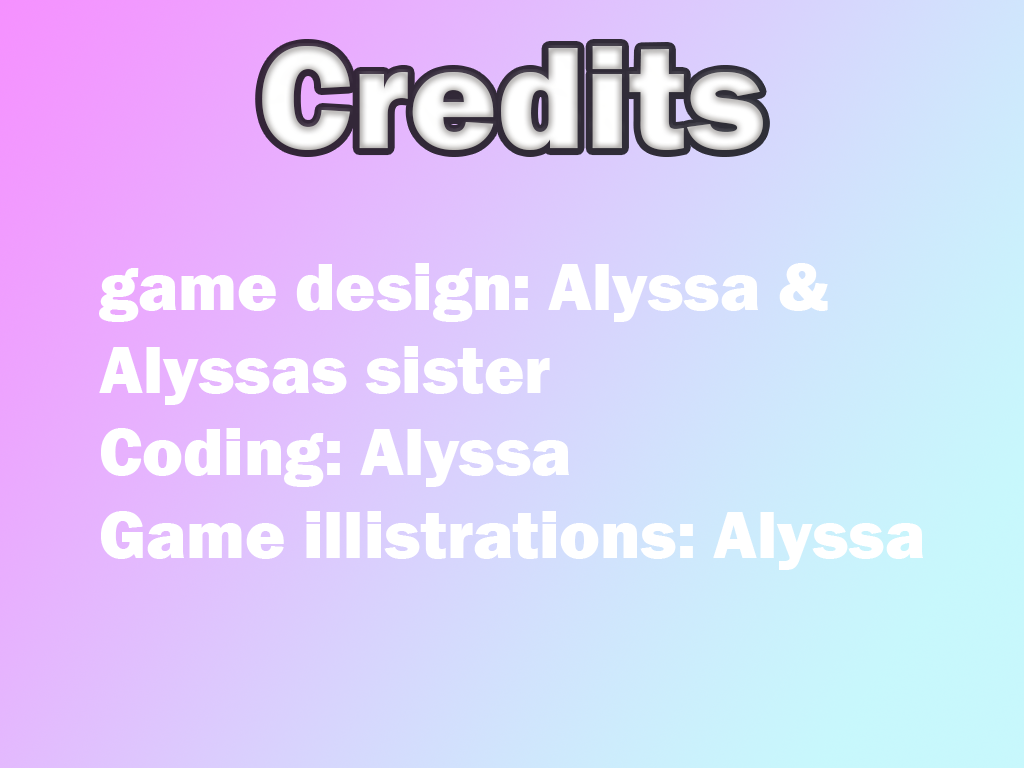
<style>
.page{position:relative;width:1024px;height:768px}
.page>*{position:absolute;margin:0}
.t1{font:150px "FranklinGothic-Heavy";color:#ffffff}
.t2{font:68.8px "FranklinGothic-Heavy";color:#ffffff}
</style>
<div class="page">
<p class="t1" style="left:262px;top:46px;width:501px;height:104px">Credits</p>
<p class="t2" style="left:99px;top:263px;width:824px;height:307px">game design: Alyssa &amp;<br>Alyssas sister<br>Coding: Alyssa<br>Game illistrations: Alyssa</p>
</div>
